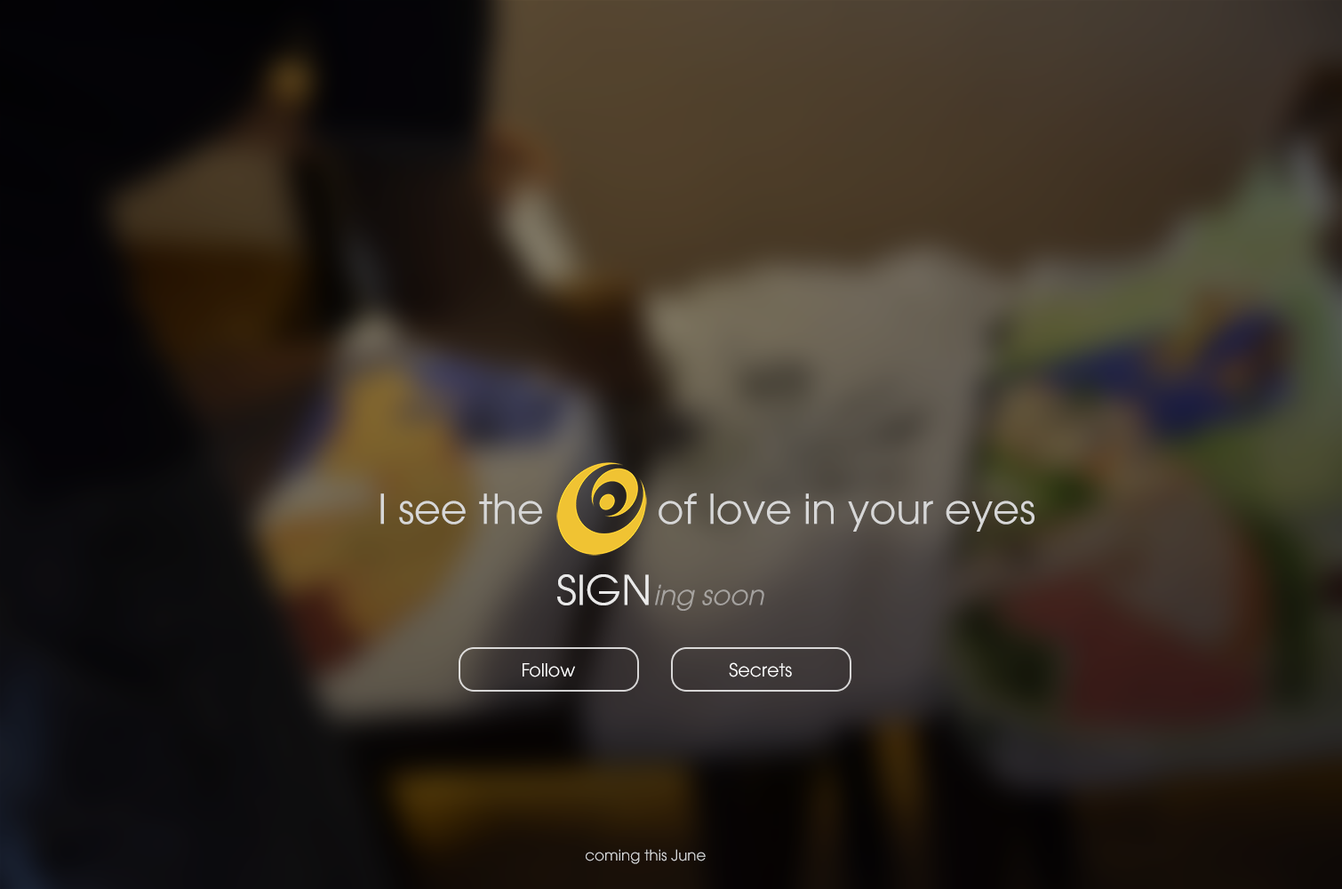
<style>
.page{position:relative;width:1342px;height:889px}
.page>*{position:absolute;margin:0}
.t1{font:40.8px "UTM-Avo";color:#d7d7d7}
.t2{font:40.8px "UTM-Avo";color:#ffffff}
.t3{font:27.2px "UTMAvo-Italic";color:#a6a39f}
.t4{font:18.2px "UTM-Avo";color:#ffffff}
.t5{font:14.8px "UTM-Avo";color:#d7d7d7}
</style>
<div class="page">
<p class="t1" style="left:380px;top:492px;width:654px;height:39px">I see the          of love in your eyes</p>
<p class="t2" style="left:557px;top:574px;width:92px;height:31px;opacity:0.86">SIGN</p>
<p class="t3" style="left:655px;top:584px;width:109px;height:26px">ing soon</p>
<p class="t4" style="left:523px;top:663px;width:52px;height:14px">Follow</p>
<p class="t4" style="left:729px;top:662px;width:63px;height:15px">Secrets</p>
<p class="t5" style="left:586px;top:849px;width:120px;height:15px">coming this June</p>
</div>
